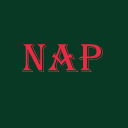
<style>
.page{position:relative;width:128px;height:128px;background:#073925}
.page>*{position:absolute;margin:0}
.t1{font:41.7px "Algerian";color:#ec2943}
</style>
<div class="page">
<p class="t1" style="left:22px;top:44px;width:81px;height:28px">Nap</p>
</div>
